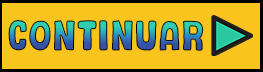
<style>
.page{position:relative;width:263px;height:72px;background:#f9c41e}
.page>*{position:absolute;margin:0}
.t1{font:40px "Chatlong"}
</style>
<div class="page">
<p class="t1" style="left:8px;top:20px;width:196px;height:31px">CONTINUAR</p>
</div>
